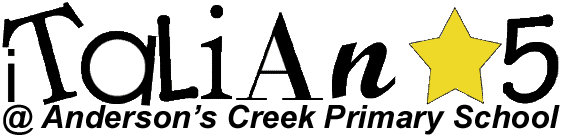
<style>
.page{position:relative;width:562px;height:137px;background:#ffffff}
.page>*{position:absolute;margin:0}
.t1{font:32px "Arial-BoldItalicMT";color:#000000}
</style>
<div class="page">
<p class="t1" style="left:3px;top:104px;width:557px;height:31px">@ Anderson’s Creek Primary School</p>
</div>
